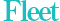
<style>
.page{position:relative;width:60px;height:21px;background:#ffffff}
.page>*{position:absolute;margin:0}
.t1{font:28px "RyuminPro-ExBold";letter-spacing:-0.08em;color:#1cbdc0}
</style>
<div class="page">
<p class="t1" style="left:3px;top:0px;width:57px;height:21px">Fleet</p>
</div>
